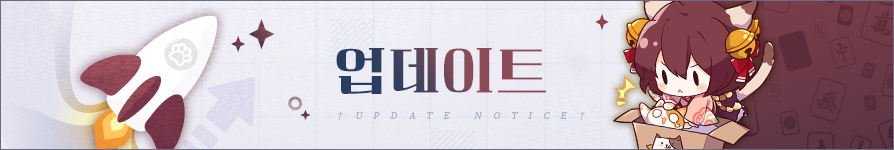
<style>
.page{position:relative;width:894px;height:150px}
.page>*{position:absolute;margin:0}
.t1{font:56.2px "Cafe24ClassicType-Regular";letter-spacing:0.04em;scale:0.93 1}
</style>
<div class="page">
<p class="t1" style="left:336px;top:48px;width:210px;height:46px">업데이트</p>
</div>
